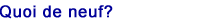
<style>
.page{position:relative;width:205px;height:20px;background:#ffffff}
.page>*{position:absolute;margin:0}
.t1{font:16px "ArialMT";letter-spacing:0.04em;color:#000099;font-weight:bold}
</style>
<div class="page">
<p class="t1" style="left:0px;top:5px;width:113px;height:14px">Quoi de neuf?</p>
</div>
